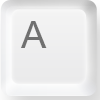
<style>
.page{position:relative;width:100px;height:100px}
.page>*{position:absolute;margin:0}
.t1{font:37.9px "ArialMT";color:#707070}
</style>
<div class="page">
<p class="t1" style="left:21px;top:21px;width:26px;height:27px">A</p>
</div>
